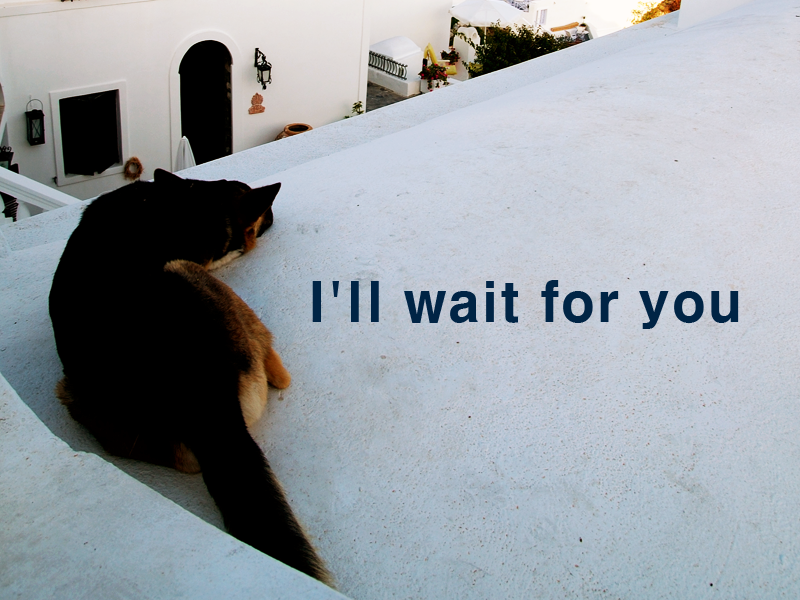
<style>
.page{position:relative;width:800px;height:600px}
.page>*{position:absolute;margin:0}
.t1{font:53.3px "HYgtrE";color:#002445}
</style>
<div class="page">
<p class="t1" style="left:312px;top:280px;width:427px;height:49px">I'll wait for you</p>
</div>
